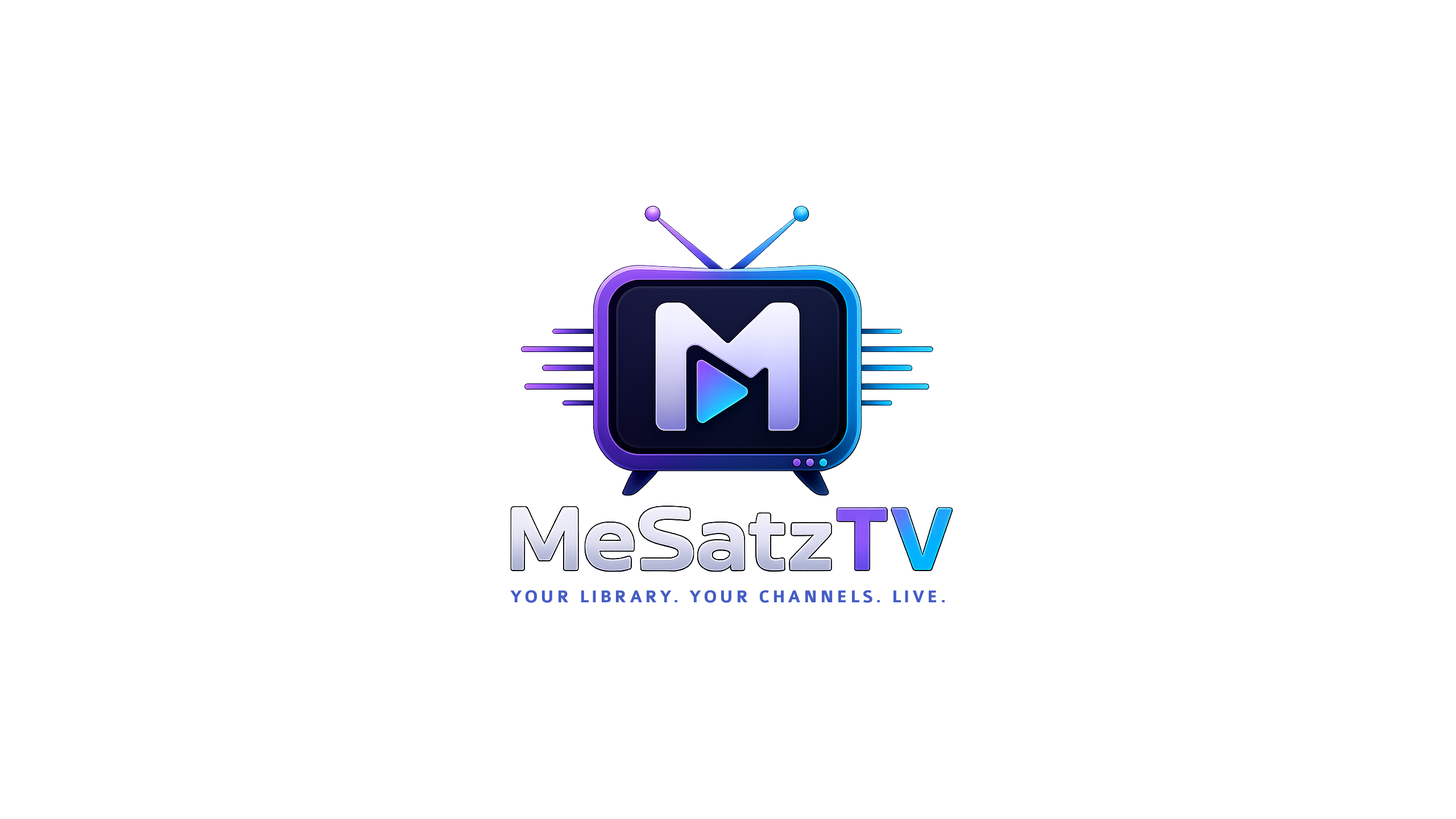
<style>
.page{position:relative;width:1456px;height:819px;background:#ffffff}
.page>*{position:absolute;margin:0}
.t1{font:18.2px "Colaborate-Bold";letter-spacing:0.15em;color:#455dc4}
</style>
<div class="page">
<p class="t1" style="left:510px;top:590px;width:435px;height:13px">YOUR LIBRARY. YOUR CHANNELS. LIVE.</p>
</div>
